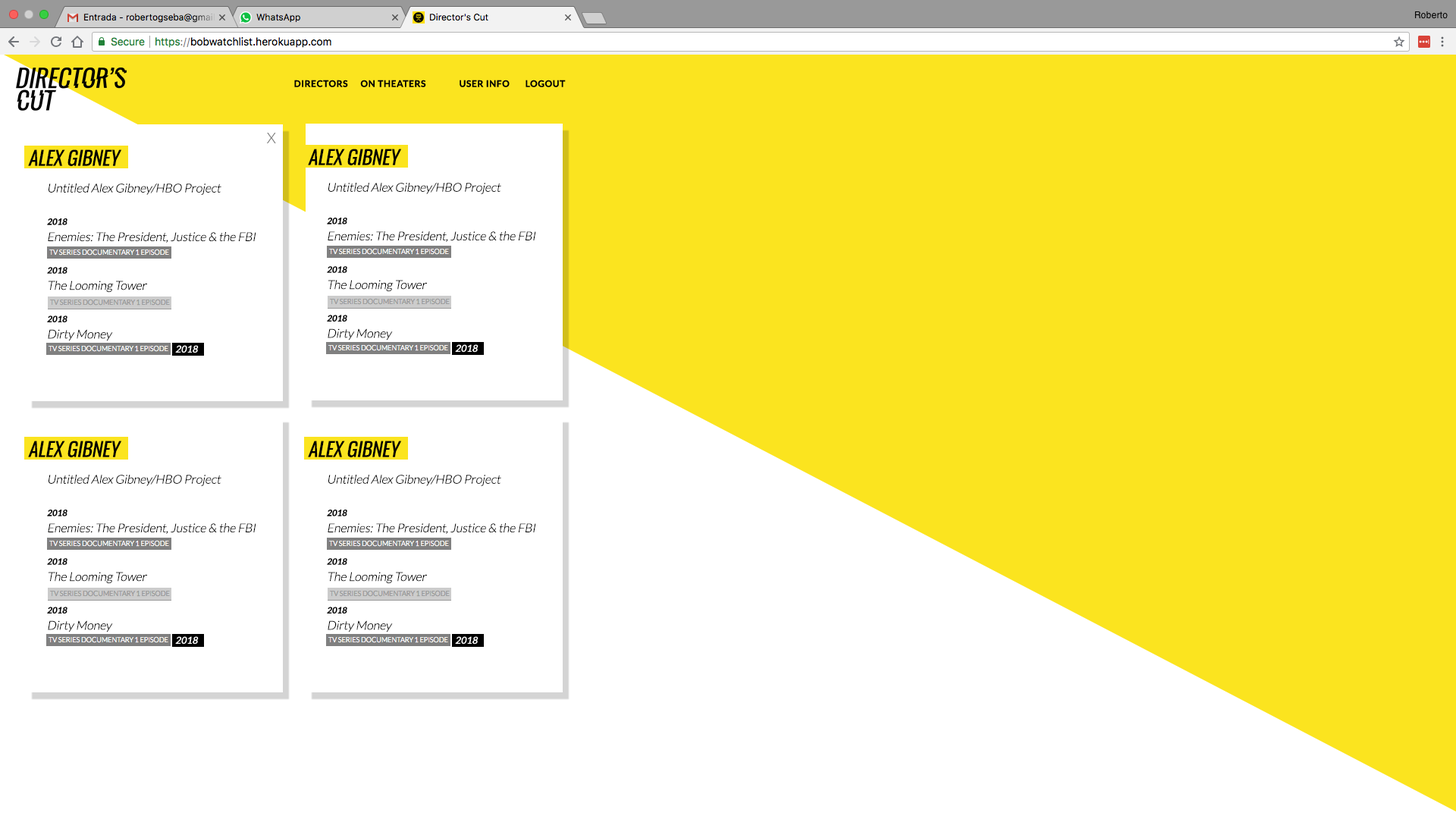
<style>
.page{position:relative;width:1456px;height:819px;background:#ffffff}
.page>*{position:absolute;margin:0}
.t1{font:9.1px "Lato-Bold";letter-spacing:0.05em;color:#000000;text-transform:uppercase}
.t2{font:14.6px "Lato-Light";letter-spacing:0.05em;color:#808080;text-transform:uppercase}
.t3{font:19.5px "Oswald-Regular";letter-spacing:-0.01em;color:#000000;text-transform:uppercase;font-style:italic}
.t4{font:12.2px/16.2px "Lato-Light";letter-spacing:-0.01em;color:#000000;font-style:italic}
.t5{font:12.2px/24.3px "Oswald-Regular";letter-spacing:-0.01em;color:#000000;text-transform:uppercase;font-style:italic}
.t6{font:8.8px/16.2px "Lato-Bold";letter-spacing:-0.01em;color:#000000;font-style:italic}
</style>
<div class="page">
<p class="t1" style="left:294px;top:80px;width:272px;height:7px">directors on theaters user info  logout</p>
<p class="t2" style="left:267px;top:133px;width:9px;height:10px">X</p>
<p class="t3" style="left:28px;top:149px;width:93px;height:17px">Alex Gibney</p>
<p class="t3" style="left:308px;top:149px;width:93px;height:16px">Alex Gibney</p>
<p class="t4" style="left:47px;top:184px;width:209px;height:157px"><span class="t5"><br></span>Untitled Alex Gibney/HBO Project<br><br><span class="t6">2018<br></span>Enemies: The President, Justice &amp; the FBI<br><br><span class="t6">2018<br></span>The Looming Tower<br><br><span class="t6">2018<br></span>Dirty Money</p>
<p class="t4" style="left:327px;top:183px;width:209px;height:157px"><span class="t5"><br></span>Untitled Alex Gibney/HBO Project<br><br><span class="t6">2018<br></span>Enemies: The President, Justice &amp; the FBI<br><br><span class="t6">2018<br></span>The Looming Tower<br><br><span class="t6">2018<br></span>Dirty Money</p>
<p class="t3" style="left:28px;top:441px;width:93px;height:16px">Alex Gibney</p>
<p class="t3" style="left:308px;top:441px;width:93px;height:16px">Alex Gibney</p>
<p class="t4" style="left:47px;top:475px;width:209px;height:157px"><span class="t5"><br></span>Untitled Alex Gibney/HBO Project<br><br><span class="t6">2018<br></span>Enemies: The President, Justice &amp; the FBI<br><br><span class="t6">2018<br></span>The Looming Tower<br><br><span class="t6">2018<br></span>Dirty Money</p>
<p class="t4" style="left:327px;top:475px;width:209px;height:157px"><span class="t5"><br></span>Untitled Alex Gibney/HBO Project<br><br><span class="t6">2018<br></span>Enemies: The President, Justice &amp; the FBI<br><br><span class="t6">2018<br></span>The Looming Tower<br><br><span class="t6">2018<br></span>Dirty Money</p>
</div>
